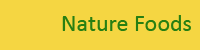
<style>
.page{position:relative;width:200px;height:50px;background:#f5d642}
.page>*{position:absolute;margin:0}
.t1{font:24px "Calibri";color:#277f12}
</style>
<div class="page">
<p class="t1" style="left:62px;top:15px;width:129px;height:16px">Nature Foods</p>
</div>
